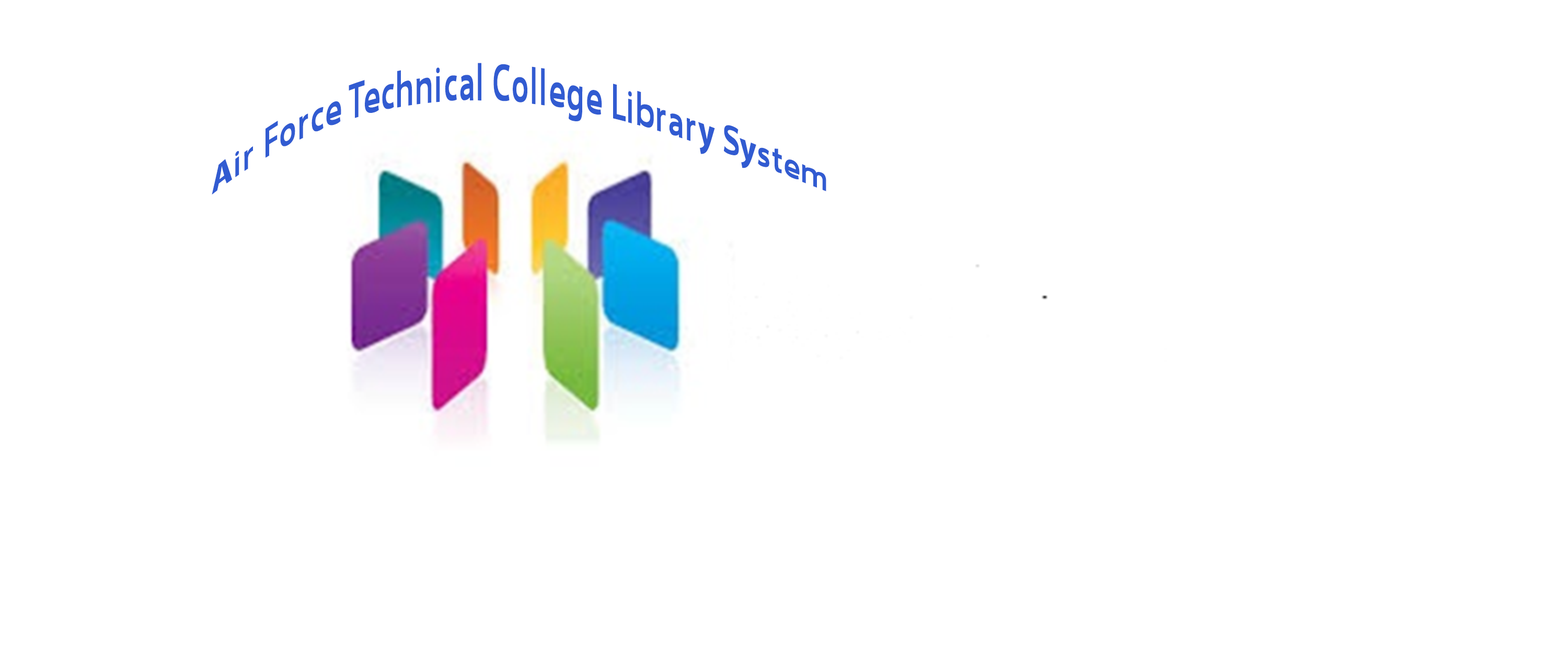
<style>
.page{position:relative;width:1568px;height:655px;background:#ffffff}
.page>*{position:absolute;margin:0}
.t1{font:33.1px "MyriadHebrew-Bold";color:#315bd1}
</style>
<div class="page">
<p class="t1" style="left:212px;top:63px;width:614px;height:131px;text-align:right">Air Force Technical College Library System</p>
</div>
